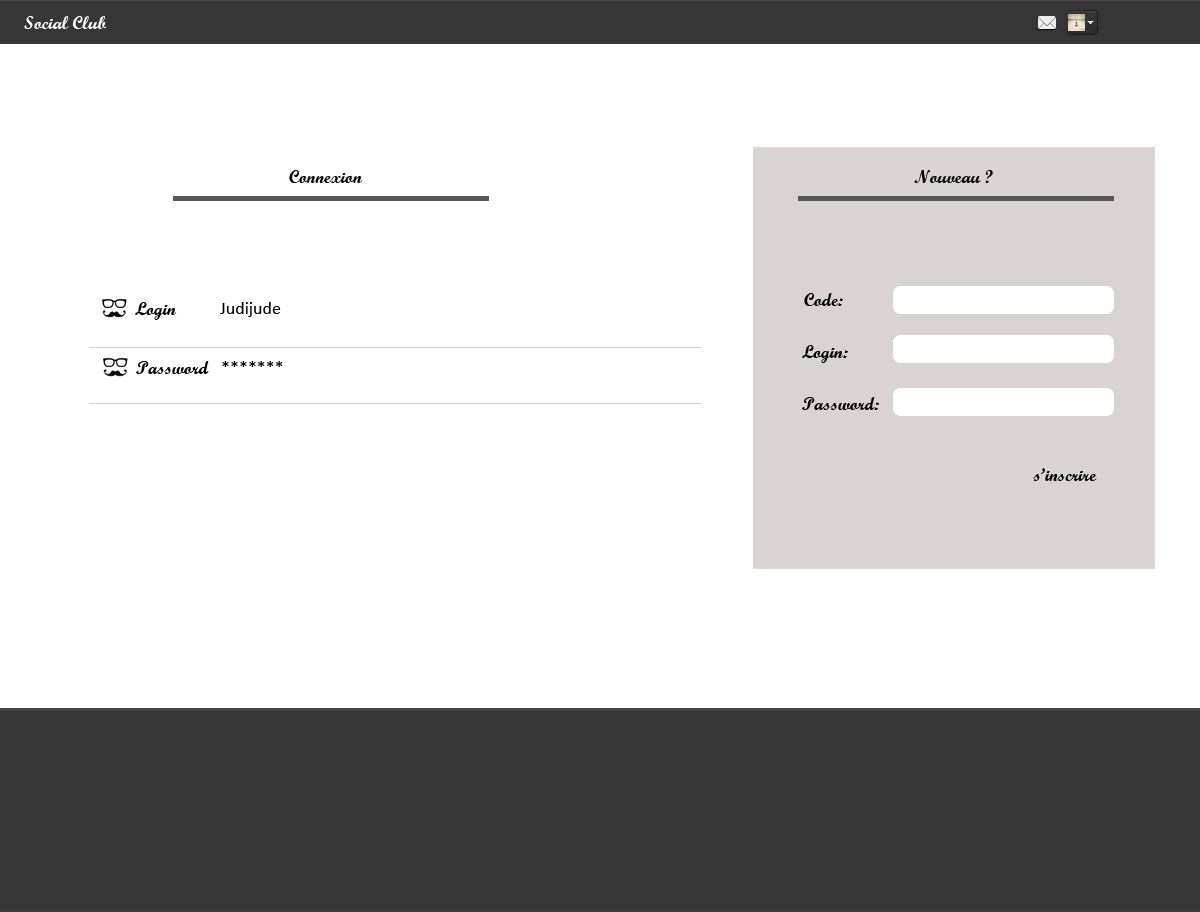
<style>
.page{position:relative;width:1200px;height:912px;background:#ffffff}
.page>*{position:absolute;margin:0}
.t1{font:18px "ScriptMTBold";color:#fefefe}
.t2{font:18px "ScriptMTBold";color:#070707}
.t3{font:18px "ScriptMTBold";color:#010101}
.t4{font:18px "Calibri";color:#010101}
</style>
<div class="page">
<p class="t1" style="left:24px;top:16px;width:83px;height:13px">Social Club</p>
<p class="t2" style="left:289px;top:170px;width:74px;height:13px">Connexion</p>
<p class="t2" style="left:914px;top:170px;width:79px;height:13px">Nouveau ?</p>
<p class="t3" style="left:804px;top:293px;width:39px;height:13px">Code:</p>
<p class="t3" style="left:135px;top:302px;width:42px;height:18px">Login</p>
<p class="t4" style="left:220px;top:302px;width:61px;height:15px">Judijude</p>
<p class="t3" style="left:802px;top:345px;width:46px;height:18px">Login:</p>
<p class="t3" style="left:136px;top:361px;width:73px;height:13px">Password</p>
<p class="t4" style="left:222px;top:361px;width:61px;height:6px">*******</p>
<p class="t3" style="left:802px;top:397px;width:78px;height:13px">Password:</p>
<p class="t3" style="left:1033px;top:468px;width:64px;height:13px">s’inscrire</p>
</div>
